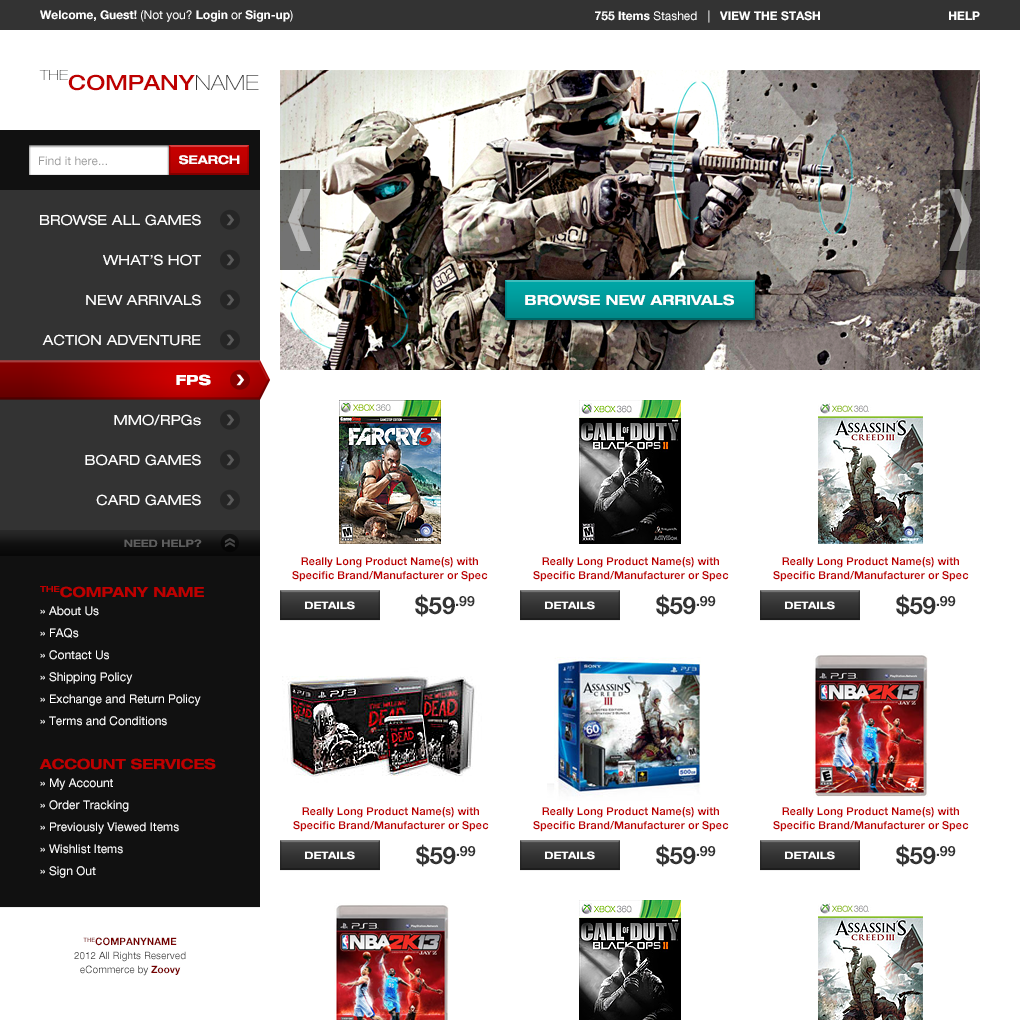
<style>
.page{position:relative;width:1020px;height:1020px;background:#ffffff}
.page>*{position:absolute;margin:0}
.t1{font:12px "HelveticaNeueLTPro-Bd";color:#ffffff}
.t2{font:12px "HelveticaNeueLTPro-Roman";color:#ffffff}
.t3{font:21px "HelveticaNeueLTPro-MdEx";color:#be0000}
.t4{font:14px "HelveticaNeueLTPro-ThEx";color:#333333}
.t5{font:21px "HelveticaNeueLTPro-ThEx";color:#333333}
.t6{font:12px "HelveticaNeueLTPro-Roman";color:#999999}
.t7{font:12px "HelveticaNeueLTPro-BdEx";color:#ffffff}
.t8{font:14px "HelveticaNeueLTPro-Ex";color:#ffffff}
.t9{font:14px "HelveticaNeueLTPro-BdEx";color:#ffffff}
.t10{font:14px "HelveticaNeueLTPro-HvEx";color:#ffffff}
.t11{font:10px "HelveticaNeueLTPro-BdEx";color:#5e5e5e}
.t12{font:11px/14px "HelveticaNeueLTPro-Bd";color:#be0000}
.t13{font:12px/22px "HelveticaNeueLTPro-Roman";color:#ffffff}
.t14{font:14px/22px "HelveticaNeueLTPro-BdEx";color:#be0000}
.t15{font:12px/18px "HelveticaNeueLTPro-Roman";color:#ffffff}
.t16{font:10px "HelveticaNeueLTPro-BdEx";color:#ffffff}
.t17{font:24px "HelveticaNeueLTPro-Bd";color:#333333}
.t18{font:10px/14px "HelveticaNeueLTPro-Roman";color:#333333}
.t19{font:10px/14px "HelveticaNeueLTPro-Bd";color:#770000;text-transform:uppercase}
.t20{font:10px/14px "HelveticaNeueLTPro-Bd";color:#770000}
</style>
<div class="page">
<p class="t1" style="left:40px;top:10px;width:253px;height:12px">Welcome, Guest! <span class="t2">(Not you? </span>Login<span class="t2"> or </span>Sign-up<span class="t2">)</span></p>
<p class="t1" style="left:595px;top:10px;width:225px;height:13px">755 Items<span class="t2"> Stashed   |   </span>VIEW THE STASH</p>
<p class="t1" style="left:949px;top:11px;width:31px;height:9px">HELP</p>
<p class="t3" style="left:39px;top:70px;width:220px;height:21px"><span class="t4">THE</span>COMPANY<span class="t5">NAME</span></p>
<p class="t6" style="left:39px;top:156px;width:68px;height:10px">Find it here...</p>
<p class="t7" style="left:179px;top:155px;width:61px;height:10px">SEARCH</p>
<p class="t8" style="left:40px;top:214px;width:161px;height:12px">BROWSE ALL GAMES</p>
<p class="t8" style="left:103px;top:254px;width:98px;height:12px">WHAT’S HOT</p>
<p class="t8" style="left:86px;top:294px;width:115px;height:12px">NEW ARRIVALS</p>
<p class="t9" style="left:525px;top:294px;width:209px;height:12px">BROWSE NEW ARRIVALS</p>
<p class="t8" style="left:42px;top:334px;width:159px;height:12px">ACTION ADVENTURE</p>
<p class="t10" style="left:176px;top:374px;width:35px;height:12px">FPS</p>
<p class="t8" style="left:114px;top:414px;width:87px;height:12px">MMO/RPGs</p>
<p class="t8" style="left:85px;top:454px;width:116px;height:12px">BOARD GAMES</p>
<p class="t8" style="left:96px;top:494px;width:105px;height:12px">CARD GAMES</p>
<p class="t11" style="left:124px;top:539px;width:78px;height:8px">NEED HELP?</p>
<p class="t12" style="left:292px;top:557px;width:196px;height:25px;text-align:center">Really Long Product Name(s) with<br>Specific Brand/Manufacturer or Spec</p>
<p class="t12" style="left:533px;top:557px;width:196px;height:25px;text-align:center">Really Long Product Name(s) with<br>Specific Brand/Manufacturer or Spec</p>
<p class="t12" style="left:773px;top:557px;width:196px;height:25px;text-align:center">Really Long Product Name(s) with<br>Specific Brand/Manufacturer or Spec</p>
<p class="t13" style="left:39px;top:586px;width:177px;height:292px"><span class="t14">THECOMPANY NAME<br></span><span class="t15">» About Us<br></span>» FAQs<br>» Contact Us<br>» Shipping Policy<br>» Exchange and Return Policy<br>» Terms and Conditions<br><br><span class="t14">ACCOUNT SERVICES<br></span><span class="t15">» My Account<br></span>» Order Tracking<br>» Previously Viewed Items<br>» Wishlist Items<br>» Sign Out</p>
<p class="t16" style="left:305px;top:601px;width:50px;height:9px">DETAILS</p>
<p class="t17" style="left:415px;top:594px;width:60px;height:23px">$59.99</p>
<p class="t16" style="left:545px;top:601px;width:50px;height:9px">DETAILS</p>
<p class="t17" style="left:656px;top:594px;width:60px;height:23px">$59.99</p>
<p class="t16" style="left:785px;top:601px;width:50px;height:9px">DETAILS</p>
<p class="t17" style="left:896px;top:594px;width:60px;height:23px">$59.99</p>
<p class="t12" style="left:293px;top:807px;width:196px;height:25px;text-align:center">Really Long Product Name(s) with<br>Specific Brand/Manufacturer or Spec</p>
<p class="t12" style="left:533px;top:807px;width:196px;height:25px;text-align:center">Really Long Product Name(s) with<br>Specific Brand/Manufacturer or Spec</p>
<p class="t12" style="left:773px;top:807px;width:196px;height:25px;text-align:center">Really Long Product Name(s) with<br>Specific Brand/Manufacturer or Spec</p>
<p class="t17" style="left:416px;top:844px;width:60px;height:23px">$59.99</p>
<p class="t17" style="left:656px;top:844px;width:60px;height:23px">$59.99</p>
<p class="t17" style="left:896px;top:844px;width:60px;height:23px">$59.99</p>
<p class="t16" style="left:305px;top:851px;width:50px;height:9px">DETAILS</p>
<p class="t16" style="left:545px;top:851px;width:50px;height:9px">DETAILS</p>
<p class="t16" style="left:785px;top:851px;width:50px;height:9px">DETAILS</p>
<p class="t18" style="left:74px;top:937px;width:112px;height:39px;text-align:center"><span class="t19">theCompanyName<br></span>2012 All Rights Reserved<br>eCommerce by <span class="t20">Zoovy</span></p>
</div>
